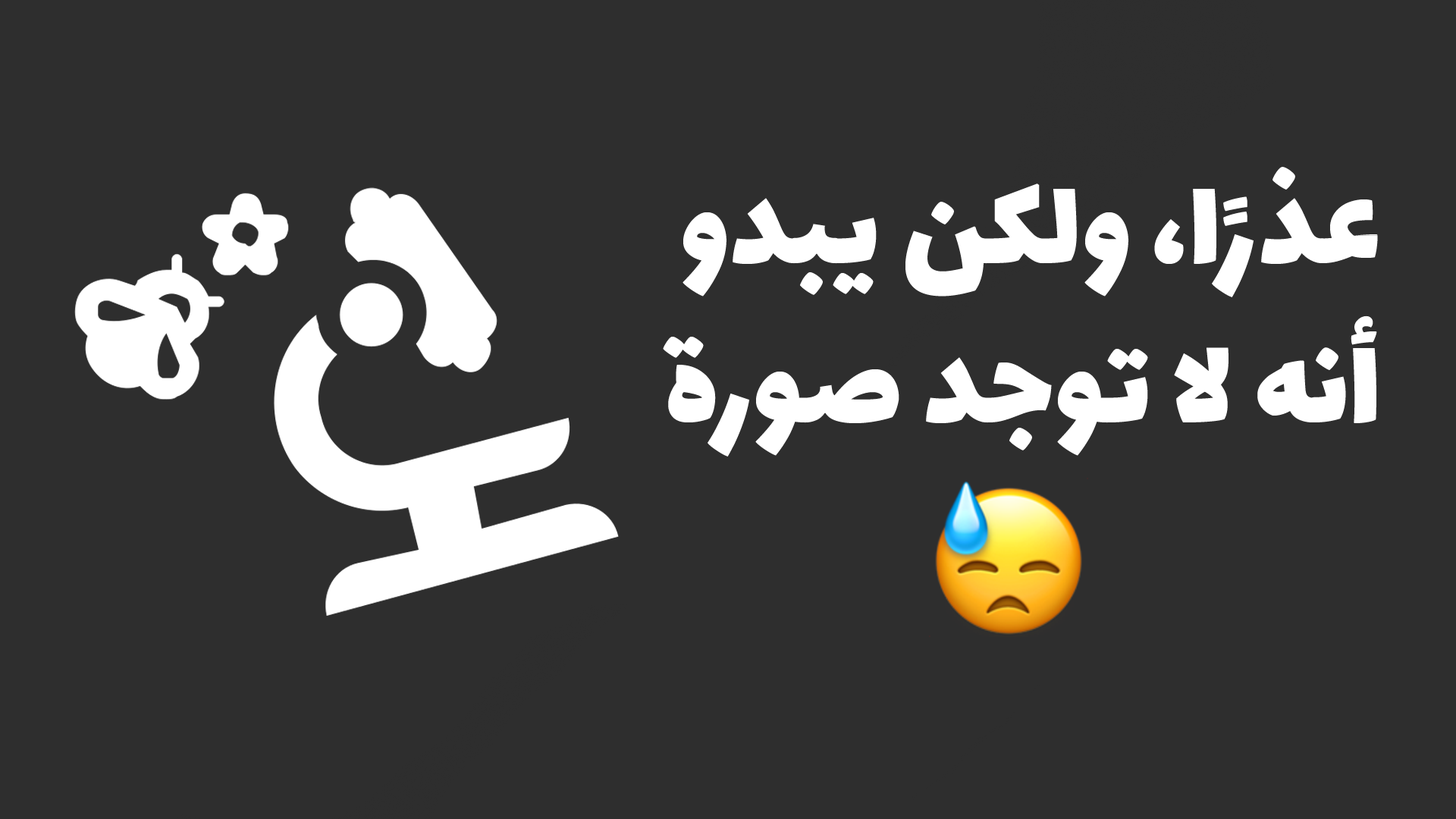
<style>
.page{position:relative;width:1456px;height:819px;background:#2e2e2e}
.page>*{position:absolute;margin:0}
.t1{font:132.7px "Lalezar-Regular";color:#ffffff}
</style>
<div class="page">
<p class="t1" style="left:663px;top:167px;width:715px;height:290px">عذرًا، ولكن يبدو أنه لا توجد صورة</p>
</div>
